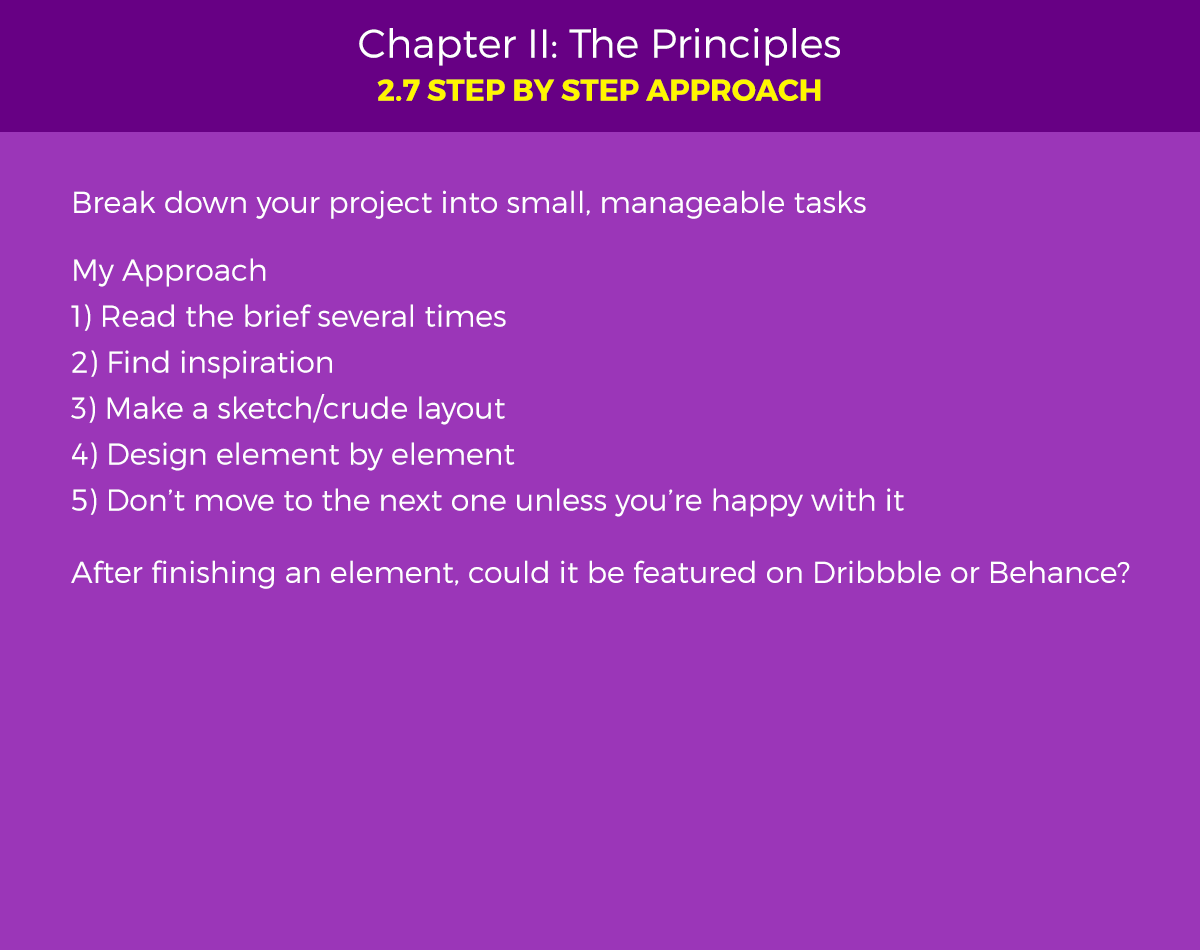
<style>
.page{position:relative;width:1200px;height:950px;background:#9b36b8}
.page>*{position:absolute;margin:0}
.t1{font:40px "Montserrat-Light";color:#ffffff}
.t2{font:30px "Montserrat-Bold";color:#fff600;text-transform:uppercase}
.t3{font:30px "Montserrat-Light";color:#ffffff}
.t4{font:30px/46px "Montserrat-Light";color:#ffffff}
</style>
<div class="page">
<p class="t1" style="left:359px;top:28px;width:481px;height:38px">Chapter II: The Principles</p>
<p class="t2" style="left:377px;top:79px;width:444px;height:22px">2.7 Step by step approach</p>
<p class="t3" style="left:74px;top:190px;width:792px;height:29px">Break down your project into small, manageable tasks</p>
<p class="t4" style="left:71px;top:258px;width:833px;height:259px">My Approach<br>1) Read the brief several times<br>2) Find inspiration<br>3) Make a sketch/crude layout<br>4) Design element by element<br>5) Don’t move to the next one unless you’re happy with it</p>
<p class="t3" style="left:71px;top:560px;width:1059px;height:29px">After finishing an element, could it be featured on Dribbble or Behance?</p>
</div>
